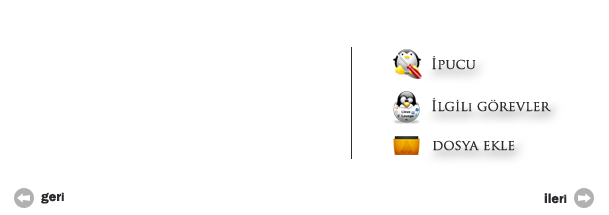
<style>
.page{position:relative;width:609px;height:215px;background:#ffffff}
.page>*{position:absolute;margin:0}
.t1{font:14px "TrajanPro-Regular";color:#2b2c30}
.t2{font:12px "TrajanPro-Regular";color:#2b2c30}
.t3{font:14px "FranklinGothic-Demi";color:#2b2c30}
.t4{font:12px "FranklinGothic-Demi";color:#2b2c30}
</style>
<div class="page">
<p class="t1" style="left:432px;top:55px;width:44px;height:15px">İpucu</p>
<p class="t1" style="left:432px;top:97px;width:119px;height:15px">İlg<span class="t2">İ</span>l<span class="t2">i</span> görevler</p>
<p class="t1" style="left:433px;top:140px;width:82px;height:11px">dosya ekle</p>
<p class="t3" style="left:41px;top:192px;width:23px;height:12px">ger<span class="t4">i</span></p>
<p class="t3" style="left:544px;top:193px;width:23px;height:11px">iler<span class="t4">i</span></p>
</div>
